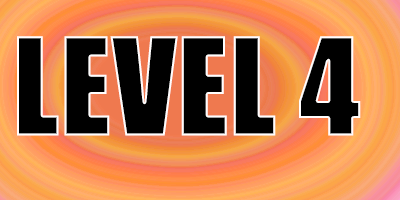
<style>
.page{position:relative;width:400px;height:200px;background:#000000}
.page>*{position:absolute;margin:0}
.t1{font:125px "Impact";color:#000000}
</style>
<div class="page">
<p class="t1" style="left:17px;top:36px;width:344px;height:100px">LEVEL 4</p>
</div>
